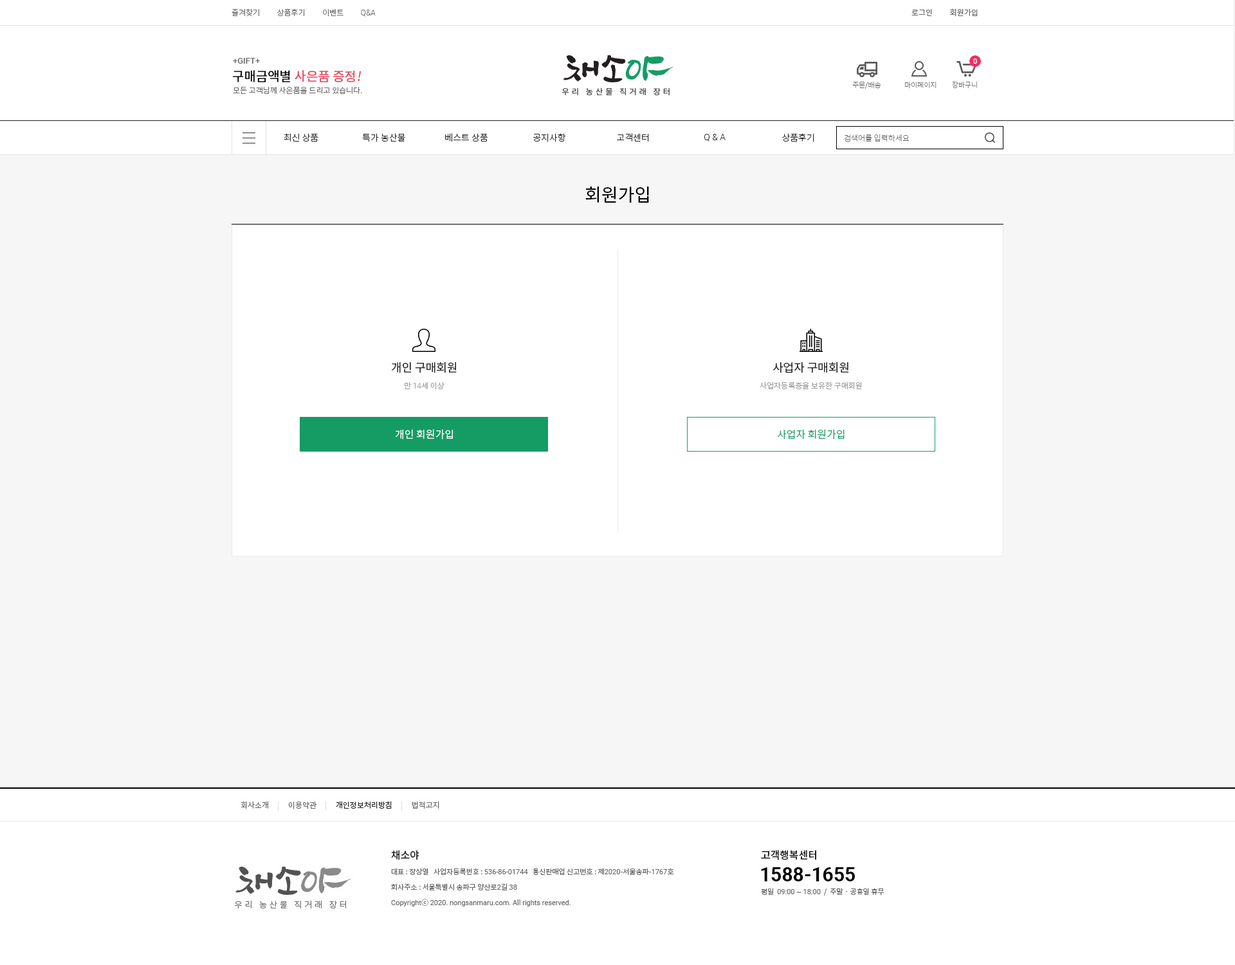
<style>
.page{position:relative;width:1235px;height:965px;background:#ffffff}
.page>*{position:absolute;margin:0}
.t1{font:7.7px "NotoSansCJKkr-Light";color:#666666}
.t2{font:7.7px "Roboto-Light";color:#666666}
.t3{font:7.7px "NotoSansCJKkr-DemiLight";color:#666666}
.t4{font:8.4px "Roboto-Medium";color:#666666}
.t5{font:12.9px "NotoSansCJKkr-Medium";color:#ea475c}
.t6{font:12.9px "NotoSansCJKkr-Medium";color:#000000}
.t7{font:12.9px "NotoSansCJKkr-Medium";color:#ea475c;font-style:italic}
.t8{font:7.1px "NotoSansCJKkr-Thin";color:#666666}
.t9{font:9px "NotoSansCJKkr-Light";color:#222222}
.t10{font:9px "Roboto-Light";color:#222222}
.t11{font:7.7px "NotoSansCJKkr-Thin";color:#666666}
.t12{font:18px "NotoSansCJKkr-Regular";color:#000000}
.t13{font:11.6px "NotoSansCJKkr-Regular";color:#222222}
.t14{font:7.7px "NotoSansCJKkr-Light";color:#999999}
.t15{font:7.7px "Roboto-Light";color:#999999}
.t16{font:10.3px "NotoSansCJKkr-DemiLight";color:#ffffff}
.t17{font:10.3px "NotoSansCJKkr-DemiLight";color:#159c65}
</style>
<div class="page">
<p class="t1" style="left:232px;top:8px;width:144px;height:9px">즐겨찾기          상품후기          이벤트          <span class="t2">Q&amp;A</span></p>
<p class="t3" style="left:912px;top:8px;width:66px;height:9px">로그인          회원가입</p>
<p class="t4" style="left:233px;top:58px;width:27px;height:6px">+GIFT+</p>
<p class="t5" style="left:233px;top:70px;width:129px;height:12px"><span class="t6">구매금액별 </span>사은품 증정<span class="t7">!</span></p>
<p class="t1" style="left:233px;top:86px;width:129px;height:8px">모든 고객님께 사은품을 드리고 있습니다.</p>
<p class="t8" style="left:853px;top:81px;width:29px;height:8px">주문/배송</p>
<p class="t8" style="left:905px;top:82px;width:32px;height:7px">마이페이지</p>
<p class="t8" style="left:952px;top:81px;width:25px;height:8px">장바구니</p>
<p class="t9" style="left:284px;top:133px;width:35px;height:9px">최신 상품</p>
<p class="t9" style="left:362px;top:133px;width:43px;height:9px">특가 농산물</p>
<p class="t9" style="left:445px;top:133px;width:43px;height:9px">베스트 상품</p>
<p class="t9" style="left:533px;top:133px;width:33px;height:9px">공지사항</p>
<p class="t9" style="left:617px;top:133px;width:32px;height:9px">고객센터</p>
<p class="t10" style="left:705px;top:134px;width:21px;height:8px">Q &amp; A</p>
<p class="t9" style="left:782px;top:133px;width:33px;height:9px">상품후기</p>
<p class="t11" style="left:844px;top:134px;width:66px;height:8px">검색어를 입력하세요</p>
<p class="t12" style="left:586px;top:186px;width:63px;height:17px">회원가입</p>
<p class="t13" style="left:391px;top:362px;width:66px;height:11px">개인 구매회원</p>
<p class="t13" style="left:773px;top:362px;width:76px;height:11px">사업자 구매회원</p>
<p class="t14" style="left:405px;top:382px;width:40px;height:8px">만 <span class="t15">14</span>세 이상</p>
<p class="t14" style="left:760px;top:382px;width:102px;height:7px">사업자등록증을 보유한 구매회원</p>
<p class="t16" style="left:395px;top:429px;width:58px;height:10px">개인 회원가입</p>
<p class="t17" style="left:778px;top:429px;width:67px;height:10px">사업자 회원가입</p>
</div>
